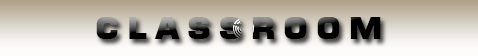
<style>
.page{position:relative;width:478px;height:56px}
.page>*{position:absolute;margin:0}
.t1{font:30px "Moire-ExtraBold"}
</style>
<div class="page">
<p class="t1" style="left:96px;top:17px;width:285px;height:22px">C L A S S R O O M</p>
</div>
